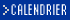
<style>
.page{position:relative;width:70px;height:20px;background:#003399}
.page>*{position:absolute;margin:0}
.t1{font:16px "LoResFifTeenNarrow";color:#ffffff}
</style>
<div class="page">
<p class="t1" style="left:11px;top:4px;width:55px;height:11px">CALENDRIER</p>
</div>
